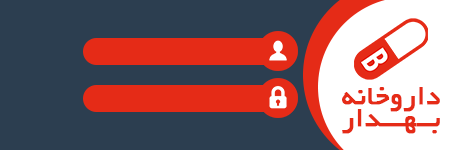
<style>
.page{position:relative;width:450px;height:150px;background:#2c3e50}
.page>*{position:absolute;margin:0}
.t1{font:29.4px/22.2px "BYekan";color:#e52b17;font-weight:bold}
</style>
<div class="page">
<p class="t1" style="left:342px;top:87px;width:98px;height:47px;text-align:center">داروخانه<br>بــهـــدار</p>
</div>
